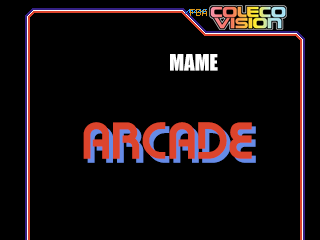
<style>
.page{position:relative;width:320px;height:240px;background:#000000}
.page>*{position:absolute;margin:0}
.t1{font:20.8px "Impact";color:#ffffff;text-transform:uppercase}
.t2{font:52px "Retrahaus";color:#dc442c;text-transform:uppercase}
.t3{font:52px "Retrahaus";text-transform:uppercase}
</style>
<div class="page">
<p class="t1" style="left:170px;top:54px;width:48px;height:17px">MAME</p>
<p class="t2" style="left:83px;top:122px;width:169px;height:37px">ARCADE</p>
<p class="t3" style="left:87px;top:126px;width:169px;height:37px">ARCADE</p>
</div>
